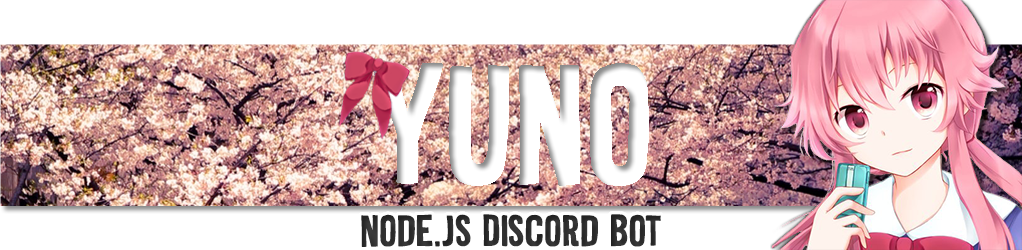
<style>
.page{position:relative;width:1022px;height:250px;background:#ffffff}
.page>*{position:absolute;margin:0}
.t1{font:45px "SilentEchoDEMO-Regular";color:#3b3b3b}
</style>
<div class="page">
<p class="t1" style="left:361px;top:214px;width:300px;height:33px">Node.js Discord Bot</p>
</div>
